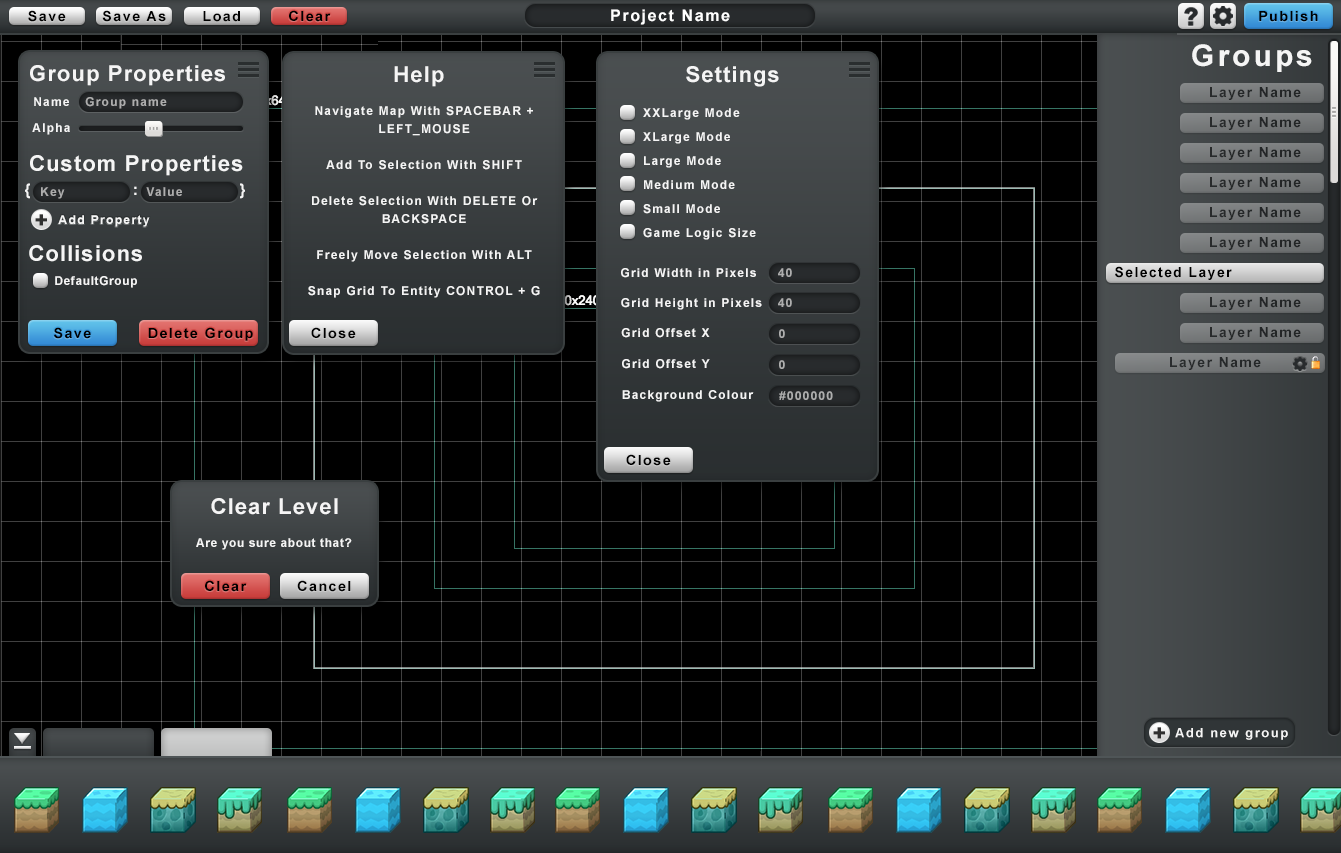
<style>
.page{position:relative;width:1341px;height:853px;background:#000000}
.page>*{position:absolute;margin:0}
.t1{font:14px "Arial-BoldMT";letter-spacing:0.1em;color:#000000}
.t2{font:16px "Arial-BoldMT";letter-spacing:0.1em;color:#ffffff}
.t3{font:30px "Arial-BoldMT";letter-spacing:0.1em;color:#f5f5f5}
.t4{font:22px "Arial-BoldMT";letter-spacing:0.05em;color:#f5f5f5}
.t5{font:14px "Arial-BoldMT";letter-spacing:0.1em;color:#242628}
.t6{font:12px "Arial-BoldMT";letter-spacing:0.1em;color:#f5f5f5}
.t7{font:12px "Arial-BoldMT";letter-spacing:0.1em;color:#aeaeae}
.t8{font:12px/18px "Arial-BoldMT";letter-spacing:0.1em;color:#f5f5f5}
.t9{font:12px/24px "Arial-BoldMT";letter-spacing:0.1em;color:#f5f5f5}
.t10{font:15.4px "Arial-BoldMT";letter-spacing:0.1em;color:#f5f5f5}
.t11{font:21.3px "Arial-Black";letter-spacing:0.12em;color:#303030}
.t12{font:12px "Arial-BoldMT";letter-spacing:0.05em;color:#f5f5f5}
.t13{font:14px "Arial-BoldMT";letter-spacing:0.1em;color:#27292b}
.t14{font:12.9px "Arial-BoldMT";letter-spacing:0.12em;color:#f5f5f5}
</style>
<div class="page">
<p class="t1" style="left:28px;top:10px;width:38px;height:12px">Save</p>
<p class="t1" style="left:102px;top:10px;width:64px;height:12px">Save As</p>
<p class="t1" style="left:203px;top:11px;width:37px;height:11px">Load</p>
<p class="t1" style="left:289px;top:10px;width:42px;height:12px">Clear</p>
<p class="t2" style="left:611px;top:9px;width:119px;height:16px">Project Name</p>
<p class="t1" style="left:1259px;top:11px;width:59px;height:11px">Publish</p>
<p class="t3" style="left:1192px;top:44px;width:120px;height:28px">Groups</p>
<p class="t4" style="left:30px;top:65px;width:195px;height:21px">Group Properties</p>
<p class="t4" style="left:394px;top:66px;width:50px;height:21px">Help</p>
<p class="t4" style="left:686px;top:66px;width:93px;height:21px">Settings</p>
<p class="t5" style="left:1210px;top:87px;width:91px;height:13px">Layer Name</p>
<p class="t6" style="left:34px;top:97px;width:35px;height:9px">Name</p>
<p class="t7" style="left:85px;top:97px;width:82px;height:12px">Group name</p>
<p class="t8" style="left:308px;top:106px;width:232px;height:192px;text-align:center">Navigate Map With SPACEBAR + LEFT_MOUSE<br><br>Add To Selection With SHIFT<br><br>Delete Selection With DELETE Or BACKSPACE<br><br>Freely Move Selection With ALT<br><br>Snap Grid To Entity CONTROL + G</p>
<p class="t9" style="left:643px;top:108px;width:113px;height:132px">XXLarge Mode<br>XLarge Mode<br>Large Mode<br>Medium Mode<br>Small Mode<br>Game Logic Size</p>
<p class="t6" style="left:32px;top:123px;width:38px;height:12px">Alpha</p>
<p class="t5" style="left:1210px;top:117px;width:91px;height:13px">Layer Name</p>
<p class="t5" style="left:1210px;top:147px;width:91px;height:13px">Layer Name</p>
<p class="t4" style="left:30px;top:155px;width:213px;height:21px">Custom Properties</p>
<p class="t10" style="left:25px;top:183px;width:5px;height:16px">{</p>
<p class="t10" style="left:240px;top:183px;width:5px;height:16px">}</p>
<p class="t5" style="left:1210px;top:177px;width:91px;height:13px">Layer Name</p>
<p class="t7" style="left:41px;top:187px;width:24px;height:12px">Key</p>
<p class="t10" style="left:134px;top:186px;width:3px;height:9px">:</p>
<p class="t7" style="left:146px;top:187px;width:36px;height:9px">Value</p>
<p class="t5" style="left:1210px;top:207px;width:91px;height:13px">Layer Name</p>
<p class="t11" style="left:35px;top:214px;width:12px;height:12px">+</p>
<p class="t6" style="left:58px;top:215px;width:92px;height:12px">Add Property</p>
<p class="t4" style="left:29px;top:245px;width:113px;height:17px">Collisions</p>
<p class="t5" style="left:1210px;top:237px;width:91px;height:13px">Layer Name</p>
<p class="t6" style="left:621px;top:268px;width:135px;height:10px">Grid Width in Pixels</p>
<p class="t7" style="left:778px;top:268px;width:14px;height:9px">40</p>
<p class="t1" style="left:1115px;top:266px;width:117px;height:14px">Selected Layer</p>
<p class="t12" style="left:55px;top:276px;width:82px;height:12px">DefaultGroup</p>
<p class="t6" style="left:621px;top:298px;width:141px;height:12px">Grid Height in Pixels</p>
<p class="t7" style="left:778px;top:298px;width:14px;height:9px">40</p>
<p class="t5" style="left:1210px;top:297px;width:91px;height:13px">Layer Name</p>
<p class="t1" style="left:54px;top:327px;width:37px;height:12px">Save</p>
<p class="t1" style="left:148px;top:327px;width:105px;height:14px">Delete Group</p>
<p class="t1" style="left:311px;top:327px;width:45px;height:12px">Close</p>
<p class="t6" style="left:621px;top:328px;width:89px;height:10px">Grid Offset X</p>
<p class="t7" style="left:779px;top:329px;width:6px;height:9px">0</p>
<p class="t5" style="left:1210px;top:327px;width:91px;height:13px">Layer Name</p>
<p class="t6" style="left:622px;top:359px;width:88px;height:10px">Grid Offset Y</p>
<p class="t7" style="left:779px;top:360px;width:6px;height:9px">0</p>
<p class="t13" style="left:1170px;top:357px;width:91px;height:13px">Layer Name</p>
<p class="t6" style="left:622px;top:390px;width:132px;height:12px">Background Colour</p>
<p class="t7" style="left:779px;top:391px;width:54px;height:9px">#000000</p>
<p class="t1" style="left:626px;top:454px;width:45px;height:12px">Close</p>
<p class="t4" style="left:211px;top:498px;width:127px;height:17px">Clear Level</p>
<p class="t12" style="left:196px;top:538px;width:156px;height:12px">Are you sure about that?</p>
<p class="t1" style="left:205px;top:580px;width:42px;height:12px">Clear</p>
<p class="t1" style="left:297px;top:580px;width:54px;height:12px">Cancel</p>
<p class="t11" style="left:1153px;top:727px;width:12px;height:12px">+</p>
<p class="t14" style="left:1175px;top:728px;width:113px;height:12px">Add new group</p>
</div>
